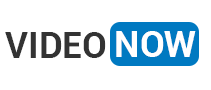
<style>
.page{position:relative;width:211px;height:90px;background:#ffffff}
.page>*{position:absolute;margin:0}
.t1{font:36px "Roboto-Bold";color:#333333}
.t2{font:36px "Roboto-Bold";color:#ffffff}
</style>
<div class="page">
<p class="t1" style="left:5px;top:32px;width:101px;height:26px">VIDEO</p>
<p class="t2" style="left:116px;top:31px;width:80px;height:26px">NOW</p>
</div>
